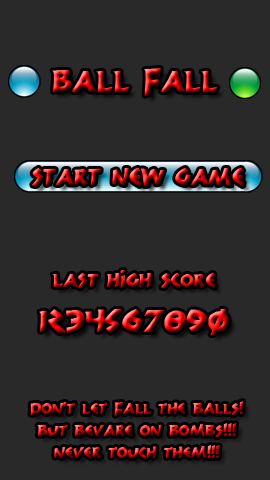
<style>
.page{position:relative;width:270px;height:480px;background:#292929}
.page>*{position:absolute;margin:0}
.t1{font:48px "300Trojans"}
.t2{font:36px "300Trojans"}
.t3{font:30px "300Trojans"}
.t4{font:24px/22px "300Trojans"}
</style>
<div class="page">
<p class="t1" style="left:52px;top:68px;width:166px;height:28px">Ball Fall</p>
<p class="t2" style="left:32px;top:167px;width:212px;height:19px">Start new game</p>
<p class="t3" style="left:52px;top:270px;width:164px;height:18px">Last High score</p>
<p class="t1" style="left:39px;top:309px;width:190px;height:26px">1234567890</p>
<p class="t4" style="left:30px;top:401px;width:214px;height:58px;text-align:center">don’t let fall the balls!<br>But bevare on bombs!!!<br>never touch them!!!</p>
</div>
